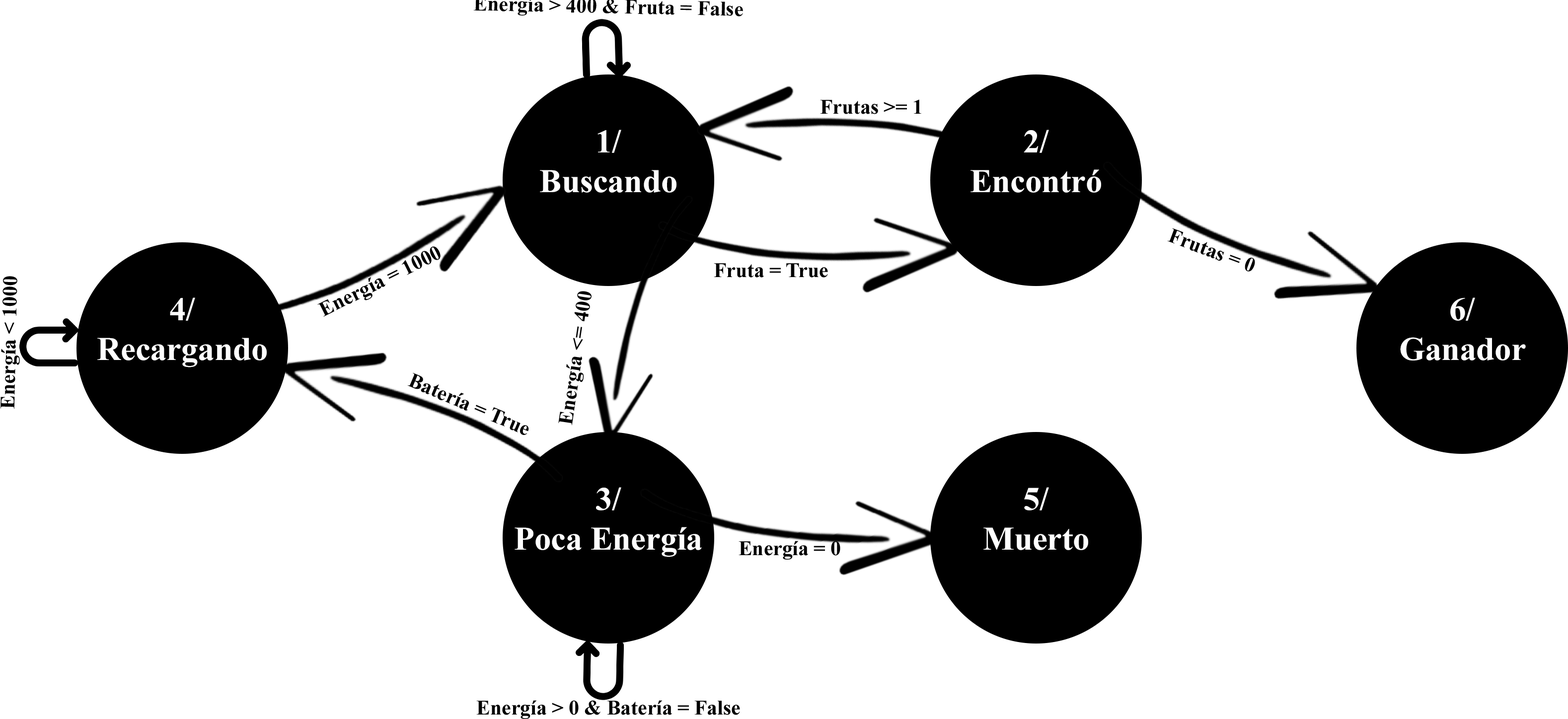
<style>
.page{position:relative;width:1568px;height:719px;background:#ffffff}
.page>*{position:absolute;margin:0}
.t1{font:20.7px "TimesNewRomanPS-BoldMT";color:#000000}
.t2{font:33.1px "TimesNewRomanPS-BoldMT";color:#fefefe}
.t3{font:12.4px "TimesNewRomanPS-BoldMT";color:#fefefe}
</style>
<div class="page">
<p class="t1" style="left:820px;top:99px;width:101px;height:15px">Frutas &gt;= 1</p>
<p class="t2" style="left:540px;top:130px;width:136px;height:63px;text-align:center"><span class="t3"><br><br><br></span>1/<br>Buscando</p>
<p class="t2" style="left:971px;top:130px;width:130px;height:63px;text-align:center"><span class="t3"><br><br><br></span>2/<br>Encontró</p>
<p class="t1" style="left:1167px;top:228px;width:88px;height:44px;rotate:21deg">Frutas = 0</p>
<p class="t1" style="left:317px;top:246px;width:124px;height:71px;rotate:-27deg">Energía = 1000</p>
<p class="t1" style="left:714px;top:263px;width:114px;height:15px">Fruta = True</p>
<p class="t1" style="left:0px;top:276px;width:20px;height:133px;rotate:-89deg">Energía &lt; 1000</p>
<p class="t1" style="left:558px;top:291px;width:34px;height:135px;rotate:-81deg">Energía &lt;= 400</p>
<p class="t2" style="left:97px;top:298px;width:170px;height:70px;text-align:center"><span class="t3"><br><br><br></span>4/<br>Recargando</p>
<p class="t2" style="left:1400px;top:298px;width:126px;height:63px;text-align:center"><span class="t3"><br><br><br></span>6/<br>Ganador</p>
<p class="t1" style="left:407px;top:373px;width:122px;height:62px;rotate:23deg">Batería = True</p>
<p class="t2" style="left:515px;top:487px;width:187px;height:70px;text-align:center"><span class="t3"><br><br><br></span>3/<br>Poca Energía</p>
<p class="t2" style="left:983px;top:487px;width:105px;height:63px;text-align:center"><span class="t3"><br><br><br></span>5/<br>Muerto</p>
<p class="t1" style="left:739px;top:541px;width:101px;height:19px">Energía = 0</p>
<p class="t1" style="left:476px;top:700px;width:264px;height:19px">Energía &gt; 0 &amp; Batería = False</p>
</div>
